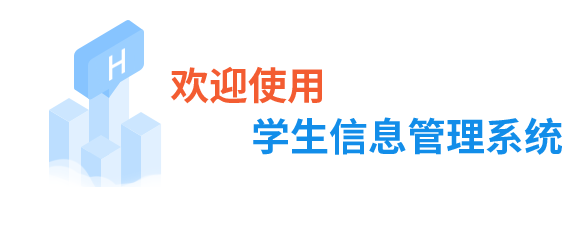
<style>
.page{position:relative;width:586px;height:237px;background:#ffffff}
.page>*{position:absolute;margin:0}
.t1{font:39px "SourceHanSansCN-Bold";color:#f35c31}
.t2{font:39px "SourceHanSansCN-Bold";color:#128de9}
</style>
<div class="page">
<p class="t1" style="left:170px;top:66px;width:152px;height:38px">欢迎使用</p>
<p class="t2" style="left:253px;top:117px;width:309px;height:38px">学生信息管理系统</p>
</div>
